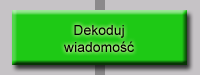
<style>
.page{position:relative;width:200px;height:75px;background:#1ec915}
.page>*{position:absolute;margin:0}
.t1{font:14px "ArialMT";color:#000000}
</style>
<div class="page">
<p class="t1" style="left:64px;top:25px;width:70px;height:27px;text-align:center">Dekoduj<br>wiadomość</p>
</div>
